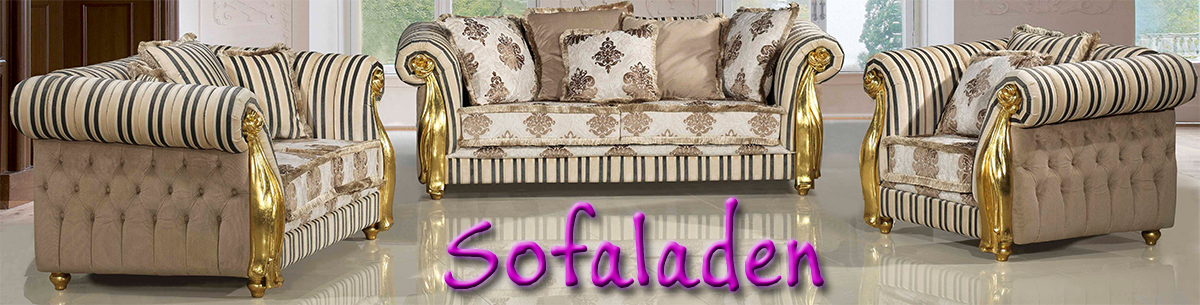
<style>
.page{position:relative;width:1200px;height:305px}
.page>*{position:absolute;margin:0}
.t1{font:102px "BuxtonSketch";letter-spacing:0.025em}
</style>
<div class="page">
<p class="t1" style="left:444px;top:197px;width:380px;height:95px">Sofaladen</p>
</div>
